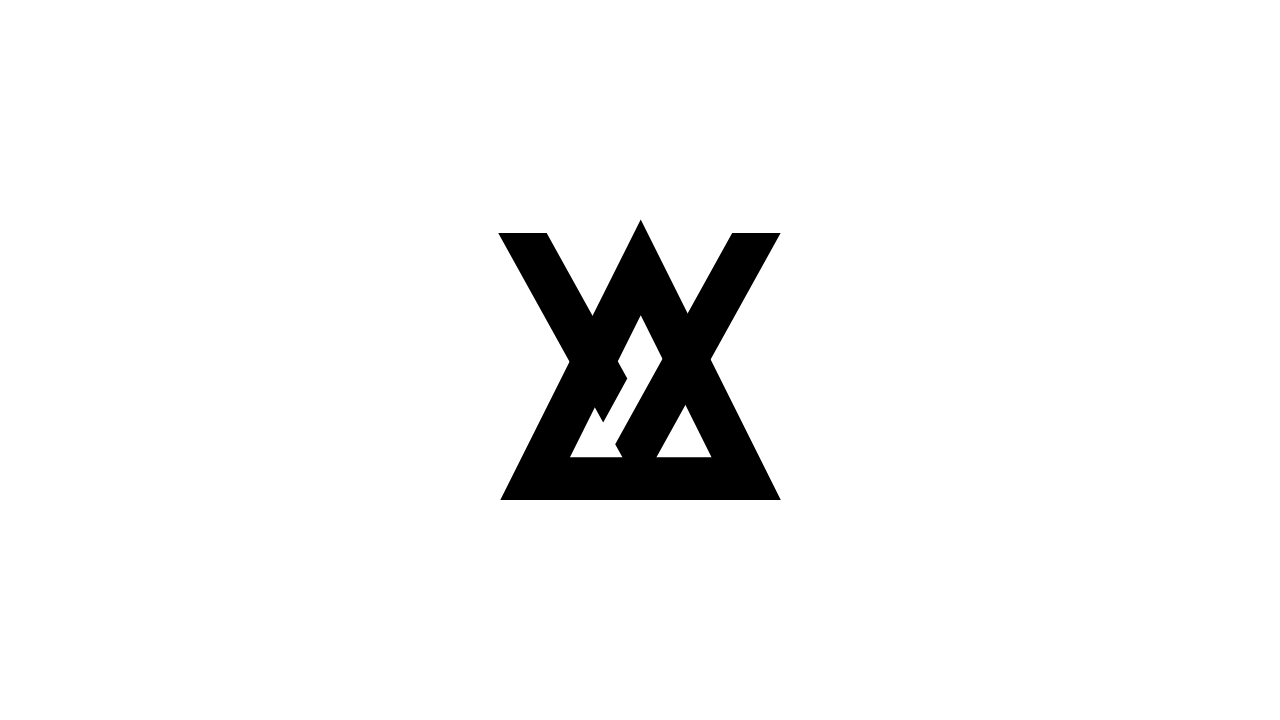
<style>
.page{position:relative;width:1280px;height:720px;background:#ffffff}
.page>*{position:absolute;margin:0}
.t1{font:382.7px "Elianto-Regular";color:#000000}
.t2{font:382.7px "AquireRegular";color:#000000}
</style>
<div class="page">
<p class="t1" style="left:500px;top:219px;width:281px;height:281px">A</p>
<p class="t2" style="left:498px;top:232px;width:283px;height:256px">V</p>
</div>
